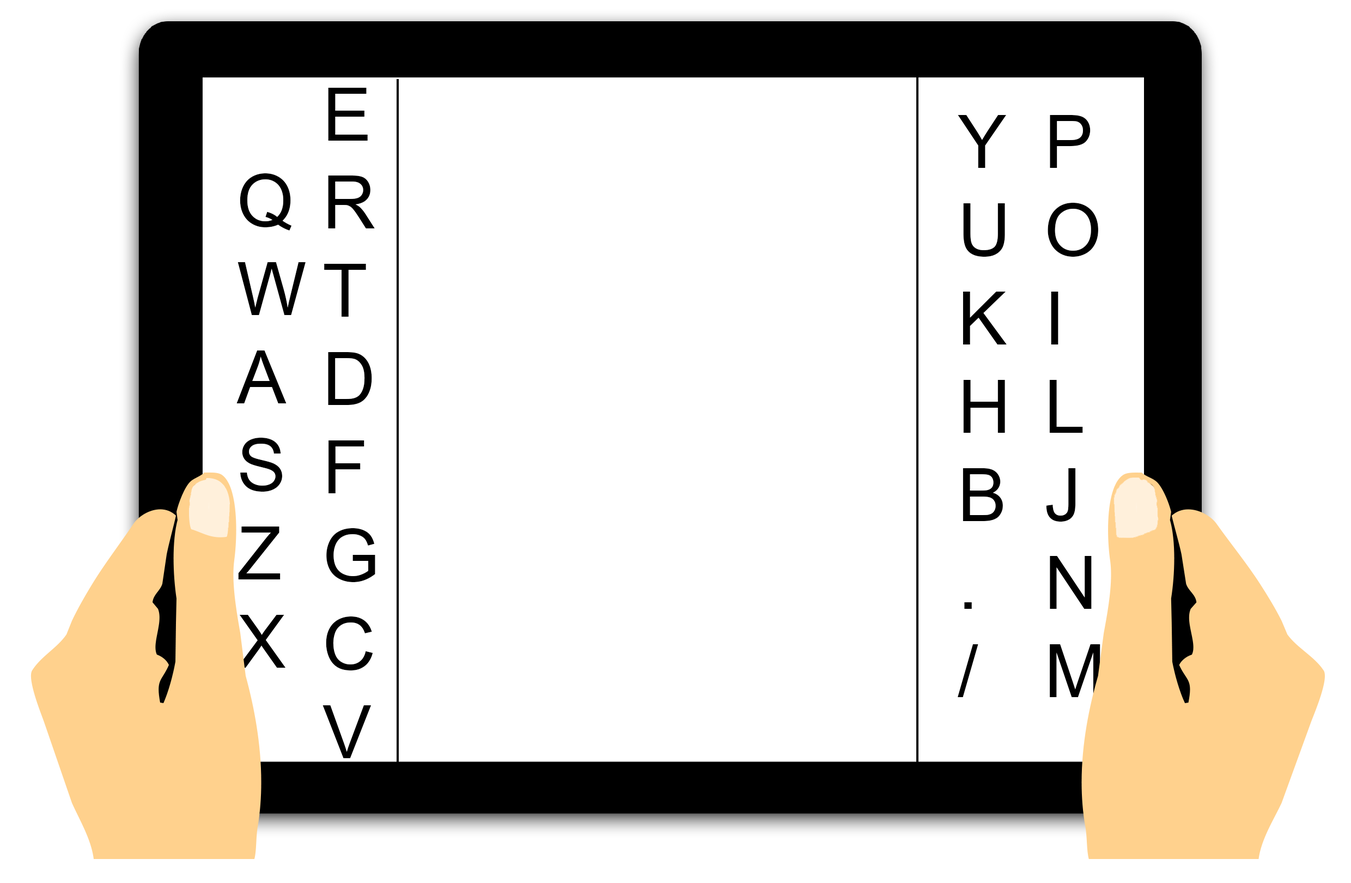
<style>
.page{position:relative;width:1351px;height:883px;background:#ffffff}
.page>*{position:absolute;margin:0}
.t1{font:73.5px "ArialMT";color:#000000}
</style>
<div class="page">
<p class="t1" style="left:323px;top:88px;width:52px;height:670px">E<br>R<br>T<br>D<br>F<br>G<br>C<br>V</p>
<p class="t1" style="left:958px;top:115px;width:49px;height:582px">Y<br>U<br>K<br>H<br>B<br>.<br>/</p>
<p class="t1" style="left:1046px;top:115px;width:54px;height:582px">P<br>O<br>I<br>L<br>J<br>N<br>M</p>
<p class="t1" style="left:236px;top:173px;width:70px;height:494px">Q<br>W<br>A<br>S<br>Z<br>X</p>
</div>
